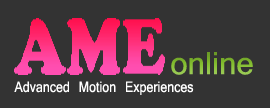
<style>
.page{position:relative;width:270px;height:108px;background:#333333}
.page>*{position:absolute;margin:0}
.t1{font:30px "Kartika";color:#84bf2f}
.t2{font:14.2px "Kartika";color:#ffffff;scale:0.85 1}
</style>
<div class="page">
<p class="t1" style="left:171px;top:52px;width:82px;height:23px">online</p>
<p class="t2" style="left:14px;top:81px;width:180px;height:14px">Advanced Motion Experiences</p>
</div>
